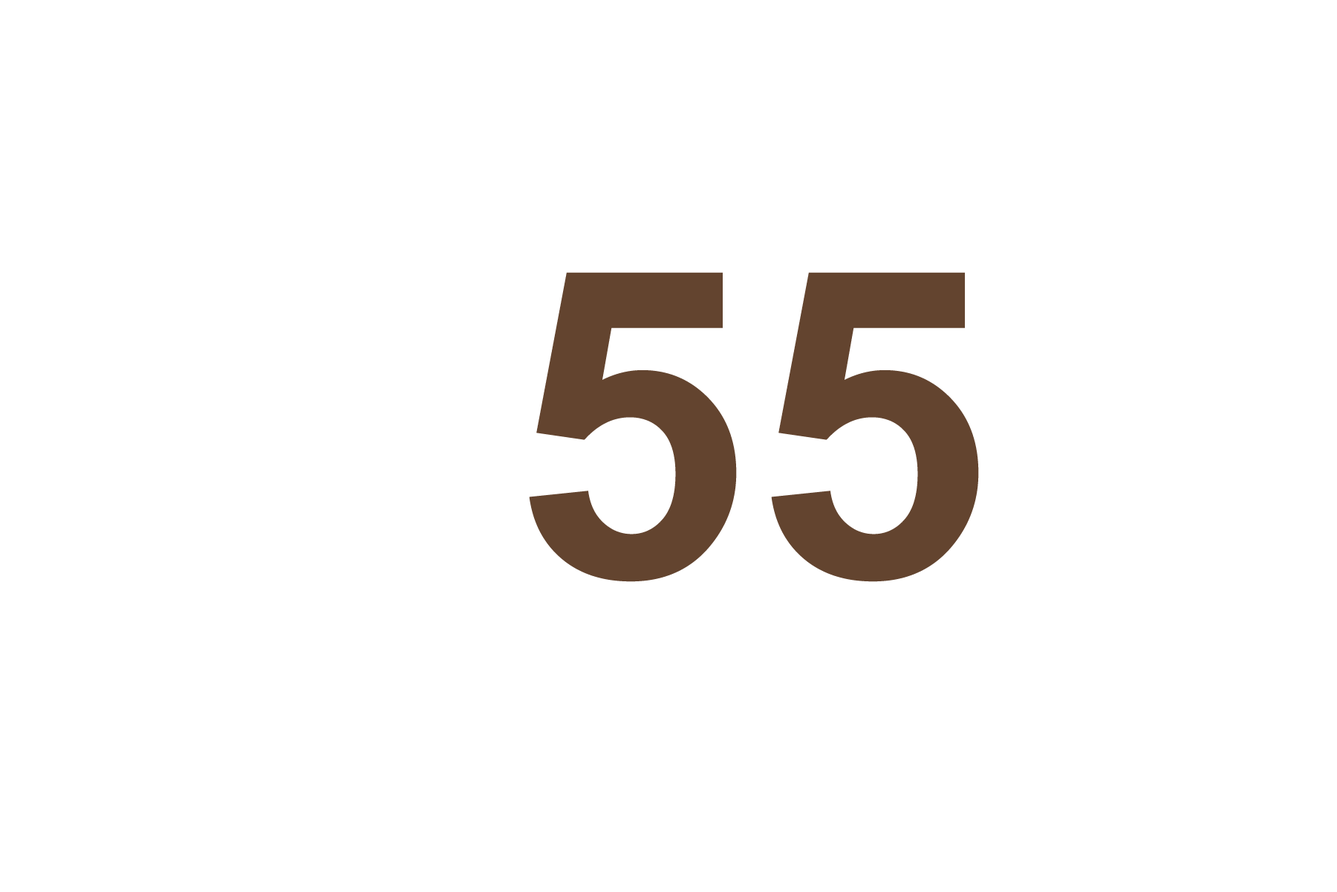
<style>
.page{position:relative;width:1337px;height:892px;background:#ffffff}
.page>*{position:absolute;margin:0}
.t1{font:429.6px "Arial-BoldMT";color:#63442f}
</style>
<div class="page">
<p class="t1" style="left:529px;top:272px;width:450px;height:310px">55</p>
</div>
